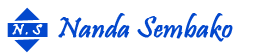
<style>
.page{position:relative;width:255px;height:56px;background:#ffffff}
.page>*{position:absolute;margin:0}
.t1{font:30px "Pristina-Regular";color:#0348cd;font-weight:bold}
</style>
<div class="page">
<p class="t1" style="left:58px;top:13px;width:175px;height:29px">Nanda Sembako</p>
</div>
